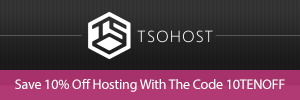
<style>
.page{position:relative;width:300px;height:100px}
.page>*{position:absolute;margin:0}
.t1{font:14px "MyriadPro-Regular";letter-spacing:-0.01em;color:#ffffff}
</style>
<div class="page">
<p class="t1" style="left:15px;top:79px;width:270px;height:13px">Save 10% Off Hosting With The Code 10TENOFF</p>
</div>
